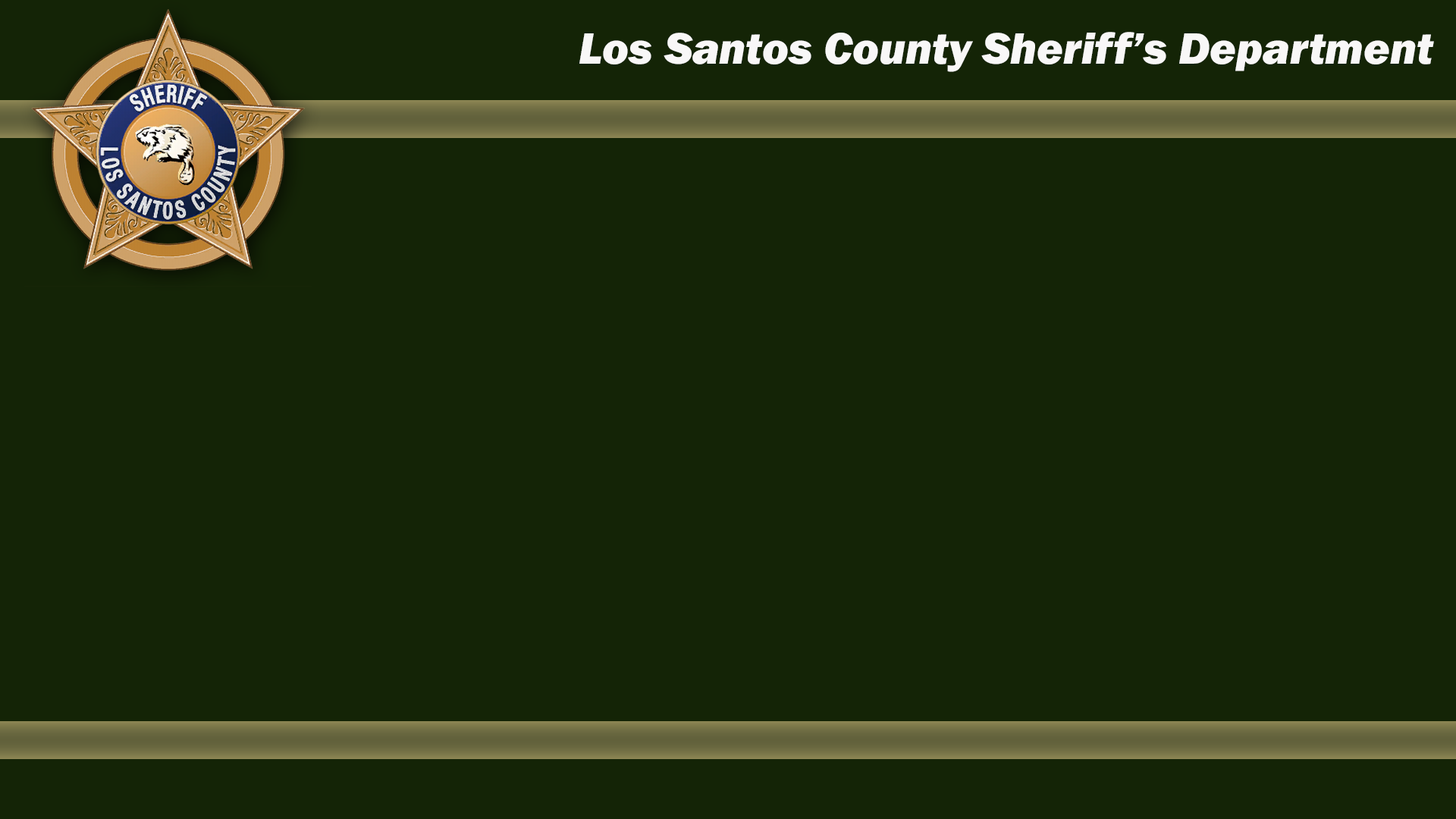
<style>
.page{position:relative;width:1456px;height:819px;background:#142406}
.page>*{position:absolute;margin:0}
.t1{font:45.5px "FranklinGothic-HeavyItalic";color:#ffffff}
</style>
<div class="page">
<p class="t1" style="left:579px;top:32px;width:855px;height:40px">Los Santos County Sheriff’s Department</p>
</div>
